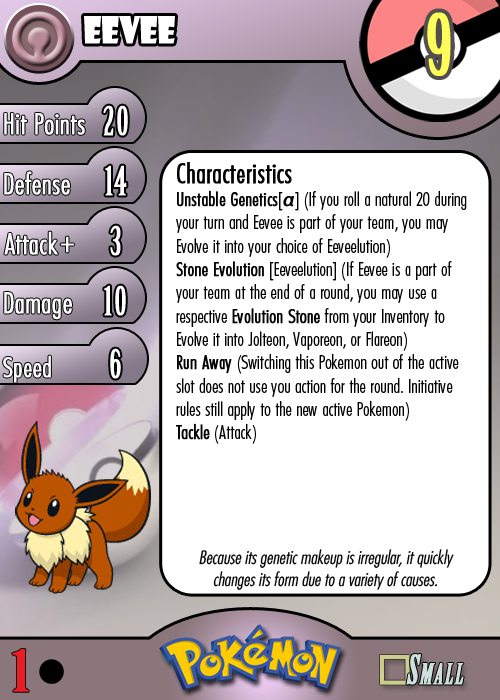
<style>
.page{position:relative;width:500px;height:700px;background:#ffffff}
.page>*{position:absolute;margin:0}
.t1{font:36.7px "ShowcardGothic-Reg";letter-spacing:-0.025em;color:#ffffff;scale:0.91 1}
.t2{font:83.3px "BirchStd";letter-spacing:0.025em;color:#fffd59;font-weight:bold}
.t3{font:27.8px "Futura-CondensedLight";color:#ffffff;font-weight:bold}
.t4{font:38.9px "BirchStd";letter-spacing:0.035em;color:#ffffff;font-weight:bold}
.t5{font:19.4px "FuturaCondensedBQ-Light";color:#010101}
.t6{font:27.8px "FuturaCondensedBQ-Light";color:#010101;font-weight:bold}
.t7{font:19.4px "FuturaCondensedBQ-Light";color:#010101;font-weight:bold}
.t8{font:19.4px "MyriadPro-Regular";letter-spacing:0.1em;color:#010101;font-weight:bold;font-style:italic}
.t9{font:30.6px "Futura-CondensedLight";color:#ffffff;font-weight:bold}
.t10{font:27.8px "FuturaCondensedBQ-Light";color:#ffffff;font-weight:bold}
.t11{font:18.1px "Futura-CondensedLight";color:#010101;font-style:italic}
.t12{font:55.6px "BirchStd";color:#ed1c24;font-weight:bold;scale:1.5 1}
</style>
<div class="page">
<p class="t1" style="left:84px;top:16px;width:91px;height:28px">eevee</p>
<p class="t2" style="left:427px;top:12px;width:24px;height:64px">9</p>
<p class="t3" style="left:4px;top:113px;width:81px;height:22px">Hit Points</p>
<p class="t4" style="left:103px;top:105px;width:25px;height:31px">20</p>
<p class="t3" style="left:4px;top:171px;width:66px;height:24px">Defense</p>
<p class="t4" style="left:105px;top:165px;width:22px;height:31px">14</p>
<p class="t5" style="left:176px;top:162px;width:291px;height:282px"><span class="t6">Characteristics<br></span><span class="t7">Unstable Genetics</span>[<span class="t8">α</span>] (If you roll a natural 20 during your turn and Eevee is part of your team, you may Evolve it into your choice of Eeveelution)<br><span class="t7">Stone Evolution</span> [Eeveelution] (If Eevee is a part of your team at the end of a round, you may use a respective <span class="t7">Evolution Stone</span> from your Inventory to Evolve it into Jolteon, Vaporeon, or Flareon)<br><span class="t7">Run Away</span> (Switching this Pokemon out of the active slot does not use you action for the round. Initiative rules still apply to the new active Pokemon)<br><span class="t7">Tackle</span> (Attack)</p>
<p class="t3" style="left:4px;top:231px;width:54px;height:24px">Attack</p>
<p class="t4" style="left:110px;top:225px;width:11px;height:31px">3</p>
<p class="t9" style="left:60px;top:236px;width:14px;height:17px">+</p>
<p class="t3" style="left:4px;top:292px;width:68px;height:28px">Damage</p>
<p class="t4" style="left:104px;top:285px;width:22px;height:31px">10</p>
<p class="t4" style="left:110px;top:348px;width:11px;height:31px">6</p>
<p class="t10" style="left:3px;top:355px;width:48px;height:28px">Speed</p>
<p class="t11" style="left:199px;top:549px;width:255px;height:41px;text-align:center">Because its genetic makeup is irregular, it quickly changes its form due to a variety of causes.</p>
<p class="t12" style="left:12px;top:649px;width:17px;height:43px">1</p>
</div>
